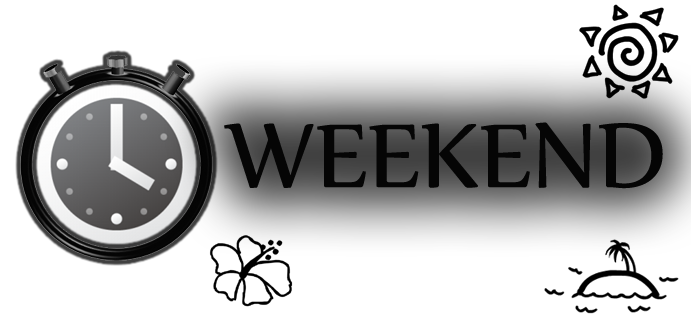
<style>
.page{position:relative;width:691px;height:336px;background:#ffffff}
.page>*{position:absolute;margin:0}
.t1{font:110px "Nyala-Regular";color:#050505}
</style>
<div class="page">
<p class="t1" style="left:224px;top:122px;width:439px;height:67px">WEEKEND</p>
</div>
